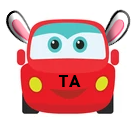
<style>
.page{position:relative;width:135px;height:135px;background:#ffffff}
.page>*{position:absolute;margin:0}
.t1{font:13.3px "HeadlineR-HM";color:#000000}
</style>
<div class="page">
<p class="t1" style="left:58px;top:75px;width:23px;height:12px">TA</p>
</div>
